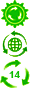
<style>
.page{position:relative;width:30px;height:90px;background:#ffffff}
.page>*{position:absolute;margin:0}
.t1{font:10px "Arial-BoldMT";color:#0cbd00}
</style>
<div class="page">
<p class="t1" style="left:9px;top:71px;width:11px;height:7px">14</p>
</div>
